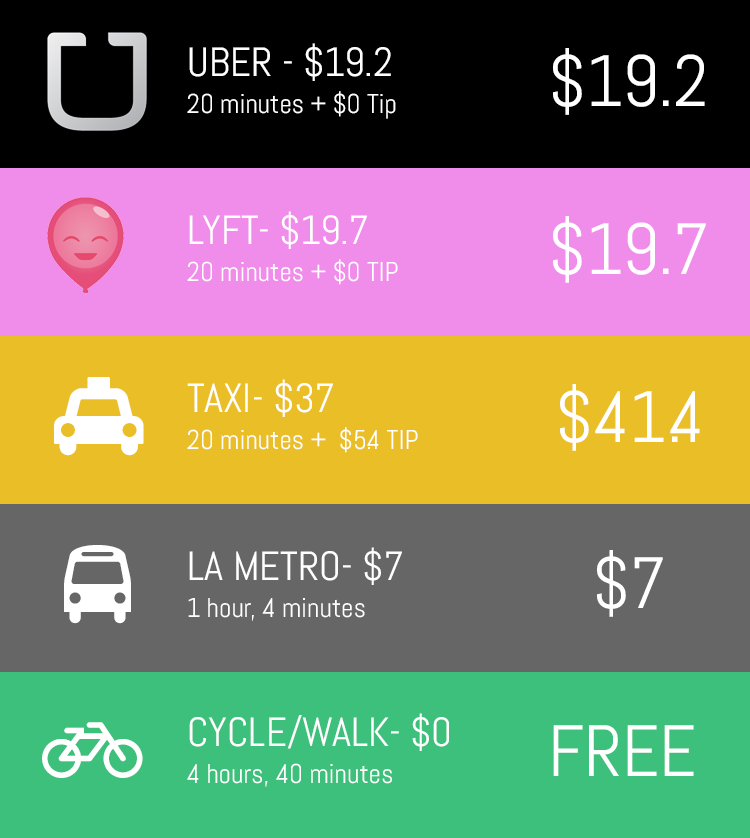
<style>
.page{position:relative;width:750px;height:838px}
.page>*{position:absolute;margin:0}
.t1{font:40.8px "Abel-Regular";color:#ffffff}
.t2{font:72.4px "Abel-Regular";color:#ffffff}
.t3{font:27.2px "Abel-Regular";color:#ffffff}
</style>
<div class="page">
<p class="t1" style="left:189px;top:43px;width:202px;height:38px">UBER - $19.2</p>
<p class="t2" style="left:553px;top:48px;width:152px;height:67px">$19.2</p>
<p class="t3" style="left:187px;top:91px;width:209px;height:28px">20 minutes + $0 Tip</p>
<p class="t1" style="left:189px;top:211px;width:178px;height:38px">LYFT- $19.7</p>
<p class="t2" style="left:553px;top:216px;width:153px;height:67px">$19.7</p>
<p class="t3" style="left:187px;top:259px;width:211px;height:26px">20 minutes + $0 TIP</p>
<p class="t1" style="left:187px;top:379px;width:146px;height:38px">TAXI- $37</p>
<p class="t2" style="left:560px;top:384px;width:140px;height:67px">$41.4</p>
<p class="t3" style="left:187px;top:427px;width:231px;height:26px">20 minutes +  $5.4 TIP</p>
<p class="t1" style="left:189px;top:547px;width:213px;height:38px">LA METRO- $7</p>
<p class="t2" style="left:597px;top:550px;width:66px;height:67px">$7</p>
<p class="t3" style="left:188px;top:598px;width:177px;height:23px">1 hour, 4 minutes</p>
<p class="t1" style="left:189px;top:713px;width:260px;height:38px">CYCLE/WALK- $0</p>
<p class="t2" style="left:553px;top:725px;width:141px;height:51px">FREE</p>
<p class="t3" style="left:187px;top:763px;width:205px;height:24px">4 hours, 40 minutes</p>
</div>
